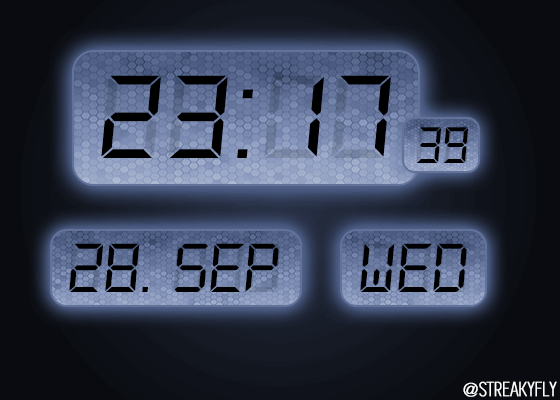
<style>
.page{position:relative;width:560px;height:400px}
.page>*{position:absolute;margin:0}
.t1{font:129.4px "DS-Digital-Italic";text-transform:uppercase;scale:1.05 1}
.t2{font:129.4px "DS-Digital-Italic";color:#000000;text-transform:uppercase;scale:1.05 1}
.t3{font:56.5px "DS-Digital-Italic";color:#000000;text-transform:uppercase}
.t4{font:76px "DS-Digital-Italic";color:#000000;text-transform:uppercase}
.t5{font:20.9px "Simplifica";color:#ffffff;text-transform:uppercase;font-weight:bold;scale:1.05 1}
</style>
<div class="page">
<p class="t1" style="left:101px;top:75px;width:290px;height:83px">00:00</p>
<p class="t2" style="left:101px;top:75px;width:152px;height:83px">23:</p>
<p class="t2" style="left:308px;top:77px;width:16px;height:80px">1</p>
<p class="t2" style="left:340px;top:75px;width:51px;height:82px">7</p>
<p class="t3" style="left:416px;top:127px;width:54px;height:36px;opacity:0.2">00</p>
<p class="t3" style="left:416px;top:127px;width:53px;height:36px">39</p>
<p class="t4" style="left:68px;top:243px;width:213px;height:49px;opacity:0.2">00. 000</p>
<p class="t4" style="left:69px;top:243px;width:210px;height:49px">28. SEP</p>
<p class="t4" style="left:359px;top:243px;width:110px;height:49px;opacity:0.2">000</p>
<p class="t4" style="left:360px;top:243px;width:107px;height:49px">WED</p>
<p class="t5" style="left:463px;top:381px;width:94px;height:16px">@StreakyFly</p>
</div>
